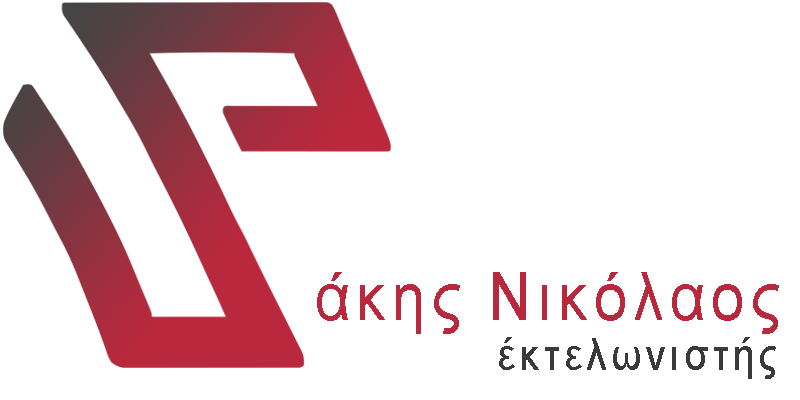
<style>
.page{position:relative;width:800px;height:400px;background:#ffffff}
.page>*{position:absolute;margin:0}
.t1{font:67.5px "ArialMT";letter-spacing:0.105em;color:#ba283d;scale:0.89 1}
.t2{font:45px "ArialMT";letter-spacing:0.105em;color:#3a3a3a;scale:0.89 1}
</style>
<div class="page">
<p class="t1" style="left:317px;top:272px;width:462px;height:62px">άκης Νικόλαος</p>
<p class="t2" style="left:499px;top:337px;width:277px;height:42px">έκτελωνιστής</p>
</div>
